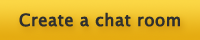
<style>
.page{position:relative;width:200px;height:40px}
.page>*{position:absolute;margin:0}
.t1{font:16.7px "LucidaGrande";color:#2f2f2f;font-weight:bold}
</style>
<div class="page">
<p class="t1" style="left:19px;top:12px;width:161px;height:15px">Create a chat room</p>
<p class="t1" style="left:19px;top:12px;width:161px;height:15px">Create a chat room</p>
</div>
